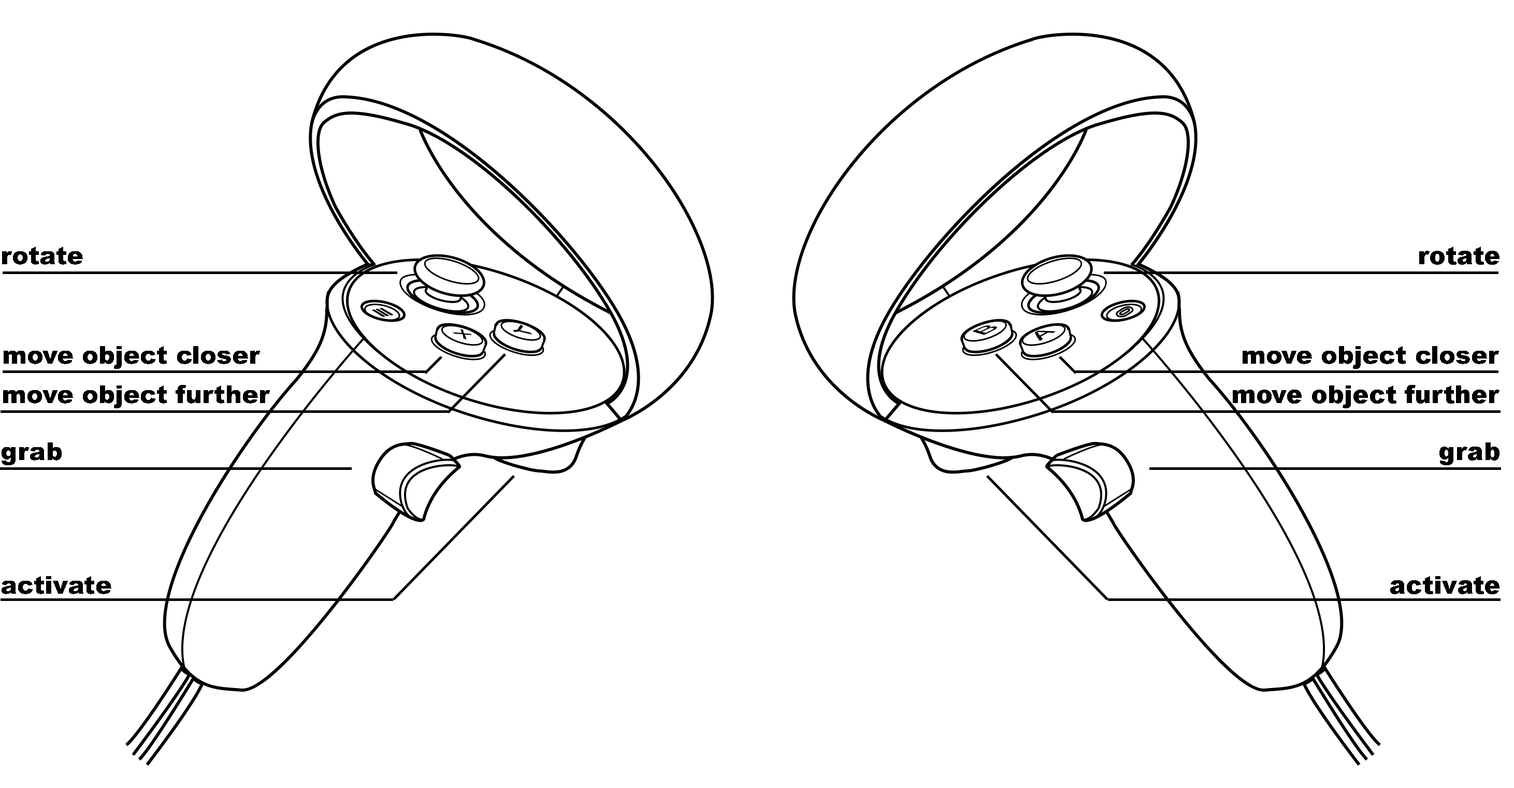
<style>
.page{position:relative;width:1514px;height:788px;background:#ffffff}
.page>*{position:absolute;margin:0}
.t1{font:24.9px "Arial-Black";color:#000000}
.t2{font:24.8px "Arial-Black";color:#000000}
</style>
<div class="page">
<p class="t1" style="left:2px;top:247px;width:81px;height:18px">rotate</p>
<p class="t1" style="left:1419px;top:247px;width:80px;height:18px">rotate</p>
<p class="t2" style="left:4px;top:346px;width:256px;height:23px">move object closer</p>
<p class="t2" style="left:1242px;top:346px;width:257px;height:23px">move object closer</p>
<p class="t1" style="left:3px;top:385px;width:267px;height:23px">move object further</p>
<p class="t1" style="left:1233px;top:385px;width:266px;height:23px">move object further</p>
<p class="t1" style="left:2px;top:442px;width:60px;height:23px">grab</p>
<p class="t1" style="left:1439px;top:442px;width:60px;height:23px">grab</p>
<p class="t1" style="left:2px;top:576px;width:109px;height:18px">activate</p>
<p class="t1" style="left:1390px;top:576px;width:109px;height:18px">activate</p>
</div>
